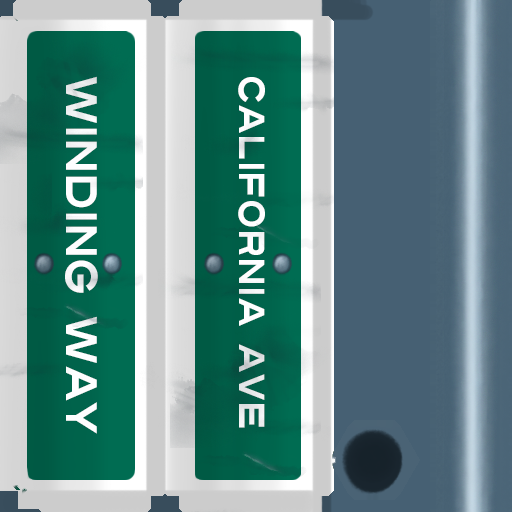
<style>
.page{position:relative;width:512px;height:512px}
.page>*{position:absolute;margin:0}
.t1{font:44px "Turnpike";color:#fefeff;scale:0.75 1}
.t2{font:36px "Turnpike";color:#fefeff;scale:0.75 1}
</style>
<div class="page">
<p class="t1" style="left:65px;top:76px;width:33px;height:358px;rotate:90deg">Winding Way</p>
<p class="t2" style="left:238px;top:77px;width:27px;height:351px;rotate:90deg">california ave</p>
</div>
